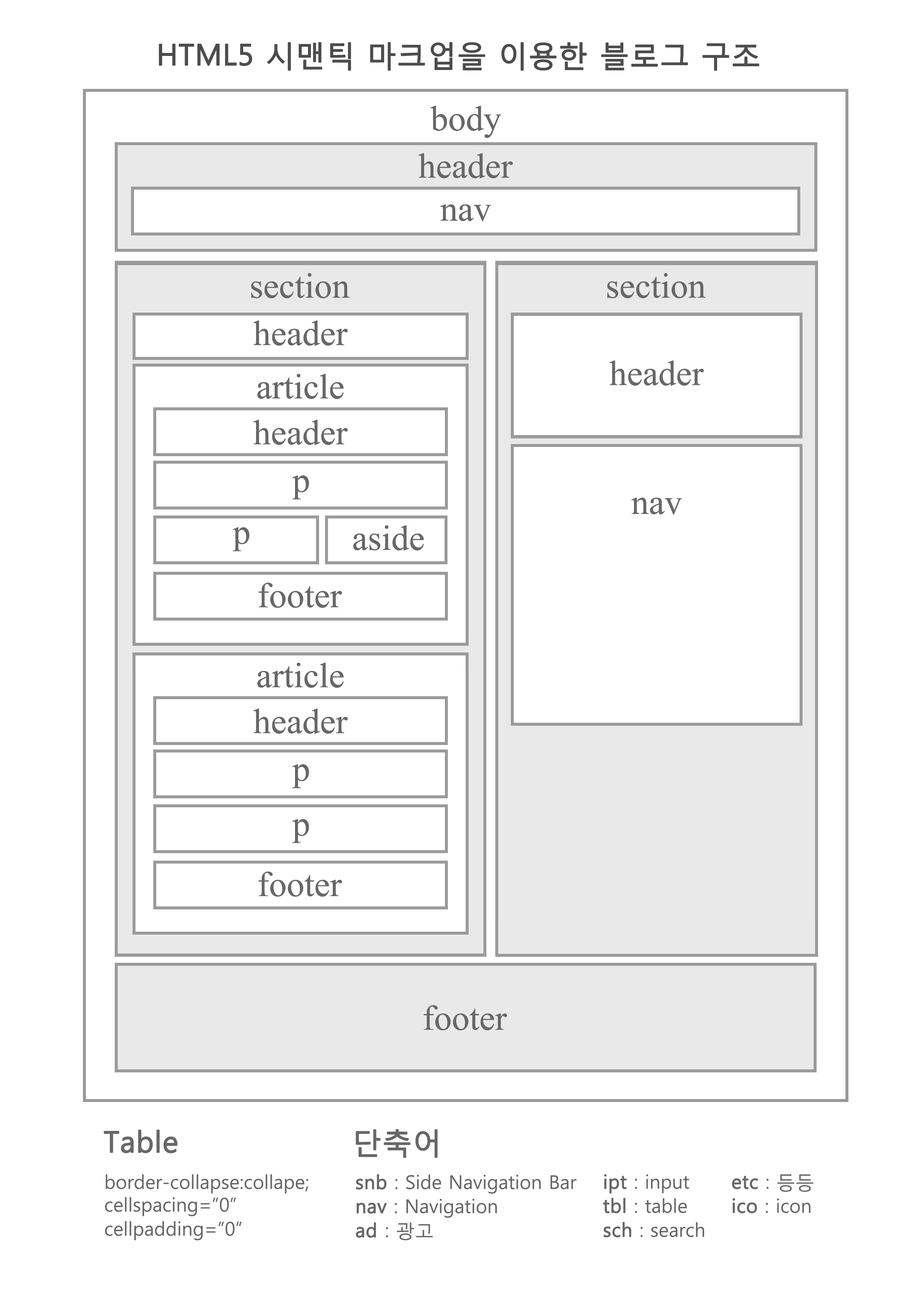
<style>
.page{position:relative;width:918px;height:1299px;background:#ffffff}
.page>*{position:absolute;margin:0}
.t1{font:29.3px "MalgunGothicRegular";color:#4c4c4c;font-weight:bold}
.t2{font:44px "Aparajita";color:#676767}
.t3{font:29.3px "MalgunGothicRegular";color:#676767;font-weight:bold}
.t4{font:19.1px "MalgunGothicRegular";color:#676767}
.t5{font:19.1px "MalgunGothicRegular";color:#676767;font-weight:bold}
</style>
<div class="page">
<p class="t1" style="left:159px;top:42px;width:600px;height:29px">HTML5 시맨틱 마크업을 이용한 블로그 구조</p>
<p class="t2" style="left:430px;top:106px;width:71px;height:32px">body</p>
<p class="t2" style="left:418px;top:153px;width:95px;height:25px">header</p>
<p class="t2" style="left:440px;top:204px;width:51px;height:17px">nav</p>
<p class="t2" style="left:251px;top:273px;width:99px;height:25px">section</p>
<p class="t2" style="left:607px;top:273px;width:99px;height:25px">section</p>
<p class="t2" style="left:253px;top:320px;width:95px;height:26px">header</p>
<p class="t2" style="left:609px;top:360px;width:95px;height:26px">header</p>
<p class="t2" style="left:257px;top:374px;width:87px;height:25px">article</p>
<p class="t2" style="left:253px;top:419px;width:95px;height:26px">header</p>
<p class="t2" style="left:292px;top:475px;width:17px;height:24px">p</p>
<p class="t2" style="left:631px;top:497px;width:51px;height:18px">nav</p>
<p class="t2" style="left:232px;top:527px;width:18px;height:24px">p</p>
<p class="t2" style="left:353px;top:525px;width:71px;height:26px">aside</p>
<p class="t2" style="left:258px;top:582px;width:84px;height:26px">footer</p>
<p class="t2" style="left:257px;top:662px;width:87px;height:26px">article</p>
<p class="t2" style="left:253px;top:708px;width:95px;height:26px">header</p>
<p class="t2" style="left:292px;top:764px;width:17px;height:24px">p</p>
<p class="t2" style="left:292px;top:819px;width:17px;height:24px">p</p>
<p class="t2" style="left:258px;top:871px;width:84px;height:26px">footer</p>
<p class="t2" style="left:424px;top:1005px;width:83px;height:25px">footer</p>
<p class="t3" style="left:104px;top:1129px;width:74px;height:24px">Table</p>
<p class="t3" style="left:356px;top:1129px;width:82px;height:29px">단축어</p>
<p class="t4" style="left:106px;top:1174px;width:202px;height:19px">border-collapse:collape;</p>
<p class="t4" style="left:356px;top:1174px;width:221px;height:66px"><span class="t5">snb</span> : Side Navigation Bar<br><span class="t5">nav</span> : Navigation<br><span class="t5">ad </span>: 광고</p>
<p class="t4" style="left:603px;top:1174px;width:102px;height:63px"><span class="t5">ipt</span> : input<br><span class="t5">tbl</span> : table<br><span class="t5">sch</span> : search</p>
<p class="t4" style="left:732px;top:1174px;width:81px;height:39px"><span class="t5">etc</span> : 등등<br><span class="t5">ico</span> : icon</p>
<p class="t4" style="left:105px;top:1197px;width:137px;height:43px">cellspacing=”0”<br>cellpadding=”0”</p>
</div>
